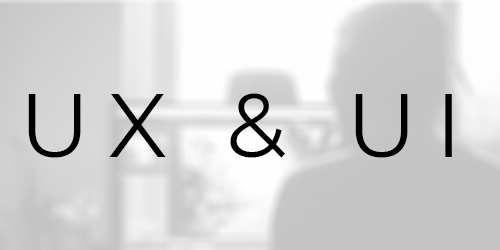
<style>
.page{position:relative;width:500px;height:250px}
.page>*{position:absolute;margin:0}
.t1{font:90px "Montserrat-Regular";letter-spacing:0.2em;color:#000000}
</style>
<div class="page">
<p class="t1" style="left:28px;top:93px;width:424px;height:65px">UX &amp; UI</p>
</div>
